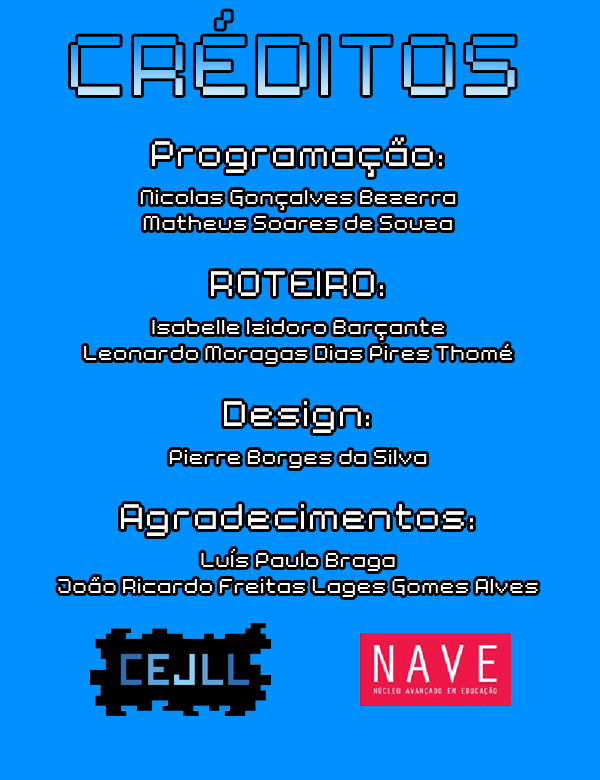
<style>
.page{position:relative;width:600px;height:780px;background:#0090ff}
.page>*{position:absolute;margin:0}
.t1{font:88.7px "Bit1"}
.t2{font:37.9px "Bit1";color:#ffffff}
.t3{font:21.3px "Bit1";color:#ffffff}
</style>
<div class="page">
<p class="t1" style="left:71px;top:11px;width:444px;height:84px">CRÉDITOS</p>
<p class="t2" style="left:152px;top:137px;width:290px;height:40px">Programação:</p>
<p class="t3" style="left:140px;top:190px;width:316px;height:40px;text-align:center">Nicolas Gonçalves Bezerra<br>Matheus Soares de Souza</p>
<p class="t2" style="left:211px;top:271px;width:172px;height:25px">ROTEIRO:</p>
<p class="t3" style="left:84px;top:320px;width:428px;height:44px;text-align:center">Isabelle Izidoro Barçante<br>Leonardo Moragas Dias Pires Thomé</p>
<p class="t2" style="left:224px;top:401px;width:145px;height:32px">Design:</p>
<p class="t3" style="left:169px;top:450px;width:258px;height:18px">Pierre Borges da Silva</p>
<p class="t2" style="left:121px;top:504px;width:352px;height:32px">Agradecimentos:</p>
<p class="t3" style="left:58px;top:549px;width:480px;height:48px;text-align:center">Luís Paulo Braga<br>João Ricardo Freitas Lages Gomes Alves</p>
</div>
